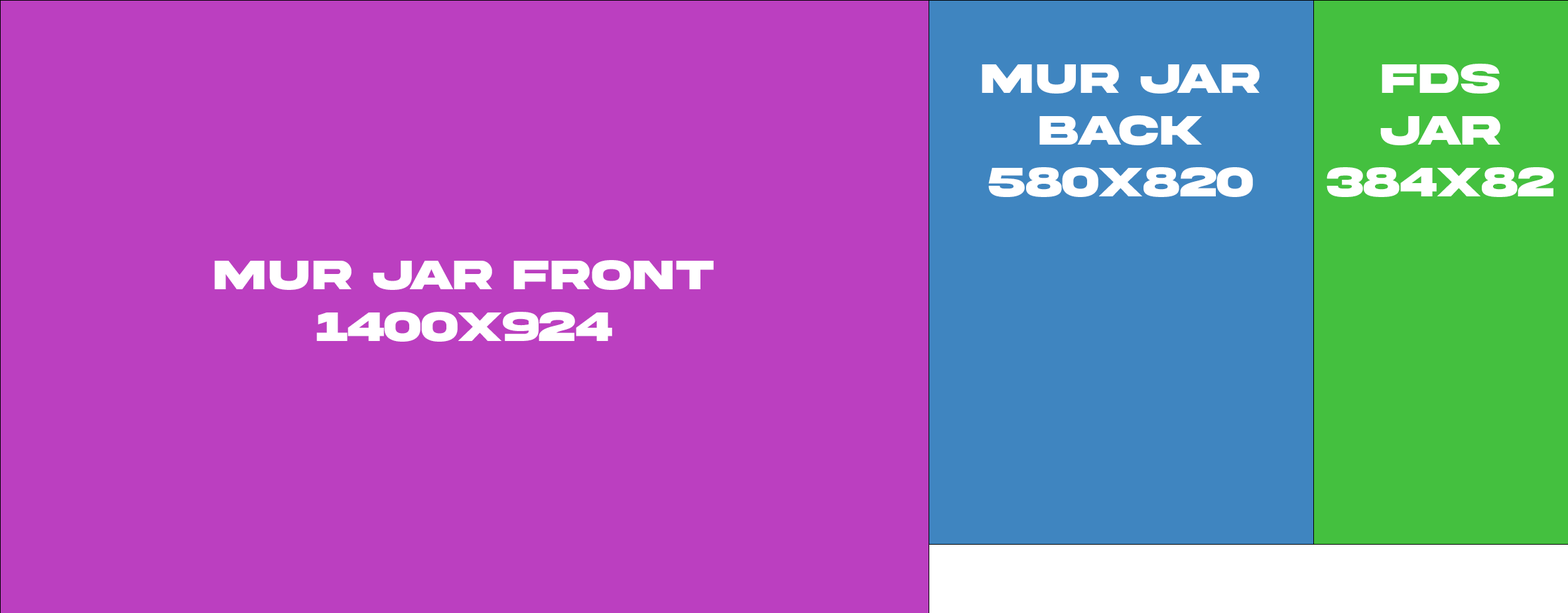
<style>
.page{position:relative;width:1568px;height:613px;background:#bb3fc0}
.page>*{position:absolute;margin:0}
.t1{font:43.1px "AkiraExpanded-SuperBold";color:#ffffff}
</style>
<div class="page">
<p class="t1" style="left:982px;top:64px;width:278px;height:133px;text-align:center">Mur Jar <br>Back<br>580x820</p>
<p class="t1" style="left:1327px;top:64px;width:227px;height:133px;text-align:center">FDS Jar <br>384x820</p>
<p class="t1" style="left:214px;top:260px;width:500px;height:82px;text-align:center">Mur Jar Front<br>1400x924</p>
</div>
